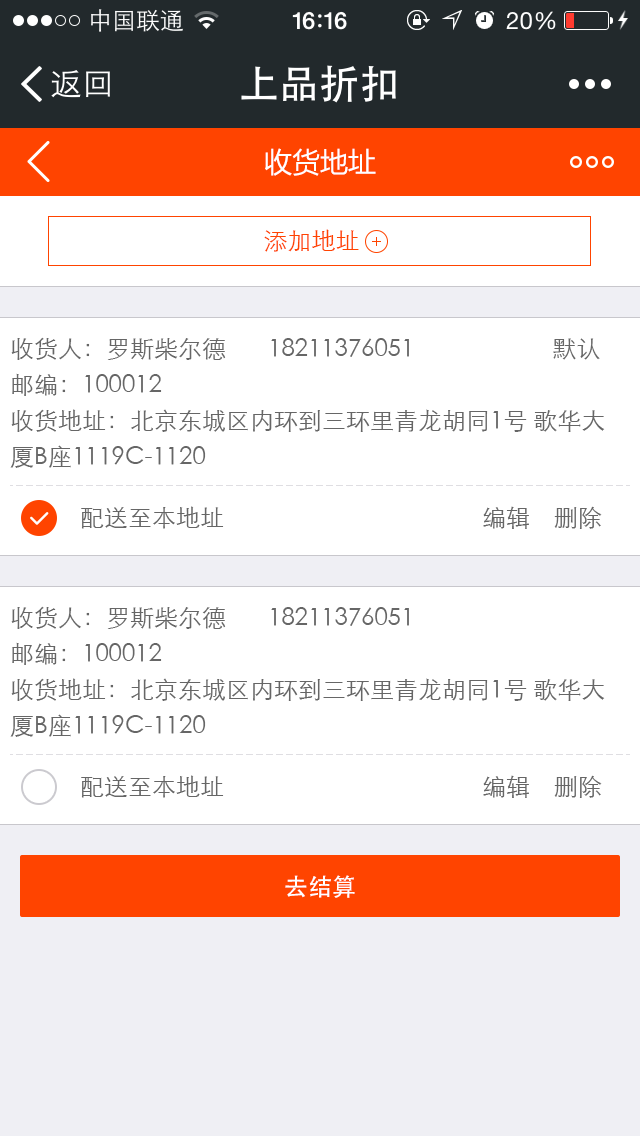
<style>
.page{position:relative;width:640px;height:1136px;background:#ffffff}
.page>*{position:absolute;margin:0}
.t1{font:28px "MicrosoftYaHei";color:#ffffff}
.t2{font:24px "STXihei";color:#ff4400}
.t3{font:24px/36px "STXihei";color:#666666}
.t4{font:24px "STXihei";color:#666666}
.t5{font:24px "STHeiti";color:#ffffff}
</style>
<div class="page">
<p class="t1" style="left:265px;top:148px;width:111px;height:28px">收货地址</p>
<p class="t2" style="left:264px;top:229px;width:95px;height:23px">添加地址</p>
<p class="t3" style="left:10px;top:337px;width:595px;height:131px">收货人：罗斯柴尔德　   18211376051                       默认<br>邮编：100012<br>收货地址：北京东城区内环到三环里青龙胡同1号 歌华大<br>厦B座1119C-1120</p>
<p class="t4" style="left:81px;top:506px;width:521px;height:23px">配送至本地址                                           编辑    删除</p>
<p class="t3" style="left:10px;top:606px;width:595px;height:131px">收货人：罗斯柴尔德　   18211376051<br>邮编：100012<br>收货地址：北京东城区内环到三环里青龙胡同1号 歌华大<br>厦B座1119C-1120</p>
<p class="t4" style="left:81px;top:775px;width:521px;height:23px">配送至本地址                                           编辑    删除</p>
<p class="t5" style="left:285px;top:875px;width:70px;height:23px">去结算</p>
</div>
